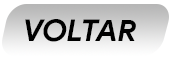
<style>
.page{position:relative;width:170px;height:60px}
.page>*{position:absolute;margin:0}
.t1{font:30px "ProductSans-BoldItalic";color:#000000}
</style>
<div class="page">
<p class="t1" style="left:25px;top:19px;width:111px;height:23px">VOLTAR</p>
</div>
